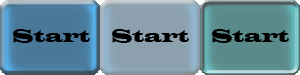
<style>
.page{position:relative;width:300px;height:75px}
.page>*{position:absolute;margin:0}
.t1{font:18px "LatinWide";color:#000000}
</style>
<div class="page">
<p class="t1" style="left:13px;top:29px;width:77px;height:14px">Start</p>
<p class="t1" style="left:112px;top:29px;width:77px;height:14px">Start</p>
<p class="t1" style="left:212px;top:29px;width:77px;height:14px">Start</p>
</div>
